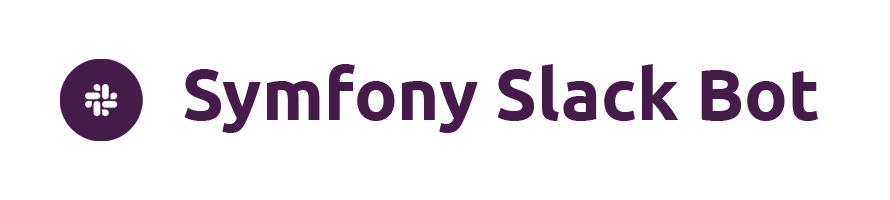
<style>
.page{position:relative;width:890px;height:200px;background:#ffffff}
.page>*{position:absolute;margin:0}
.t1{font:72px "Ubuntu-Bold";color:#441b49}
</style>
<div class="page">
<p class="t1" style="left:184px;top:64px;width:634px;height:69px">Symfony Slack Bot</p>
</div>
